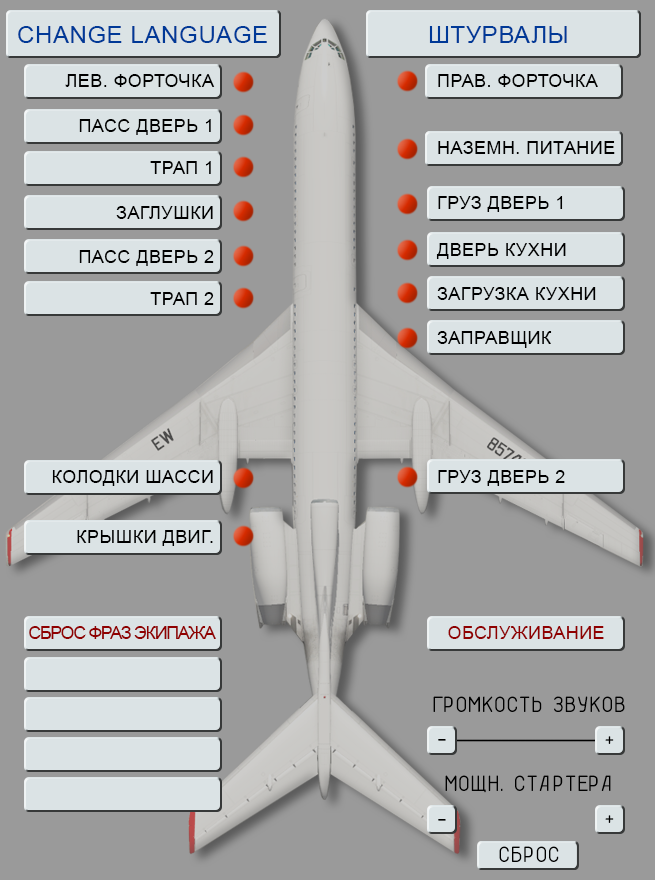
<style>
.page{position:relative;width:655px;height:880px;background:#9a9a9a}
.page>*{position:absolute;margin:0}
.t1{font:24px "ArialMT";letter-spacing:0.025em;color:#003997}
.t2{font:18px "ArialMT";letter-spacing:0.025em;color:#000000}
.t3{font:18px "ArialMT";letter-spacing:-0.075em;color:#8f0000}
.t4{font:18px "ArialMT";letter-spacing:0.025em;color:#8f0000}
.t5{font:24px "LENYA69";color:#000000}
</style>
<div class="page">
<p class="t1" style="left:18px;top:26px;width:249px;height:17px">CHANGE LANGUAGE</p>
<p class="t1" style="left:429px;top:26px;width:138px;height:17px">ШТУРВАЛЫ</p>
<p class="t2" style="left:65px;top:74px;width:150px;height:13px">ЛЕВ. ФОРТОЧКА</p>
<p class="t2" style="left:438px;top:74px;width:160px;height:13px">ПРАВ. ФОРТОЧКА</p>
<p class="t2" style="left:79px;top:119px;width:132px;height:16px">ПАСС ДВЕРЬ 1</p>
<p class="t2" style="left:438px;top:141px;width:177px;height:13px">НАЗЕМН. ПИТАНИЕ</p>
<p class="t2" style="left:150px;top:161px;width:61px;height:13px">ТРАП 1</p>
<p class="t2" style="left:438px;top:196px;width:125px;height:16px">ГРУЗ ДВЕРЬ 1</p>
<p class="t2" style="left:116px;top:206px;width:97px;height:13px">ЗАГЛУШКИ</p>
<p class="t2" style="left:436px;top:243px;width:130px;height:16px">ДВЕРЬ КУХНИ</p>
<p class="t2" style="left:79px;top:250px;width:135px;height:16px">ПАСС ДВЕРЬ 2</p>
<p class="t2" style="left:150px;top:292px;width:64px;height:13px">ТРАП 2</p>
<p class="t2" style="left:437px;top:287px;width:159px;height:13px">ЗАГРУЗКА КУХНИ</p>
<p class="t2" style="left:437px;top:331px;width:115px;height:17px">ЗАПРАВЩИК</p>
<p class="t2" style="left:52px;top:470px;width:161px;height:16px">КОЛОДКИ ШАССИ</p>
<p class="t2" style="left:438px;top:470px;width:127px;height:16px">ГРУЗ ДВЕРЬ 2</p>
<p class="t2" style="left:77px;top:530px;width:136px;height:16px">КРЫШКИ ДВИГ.</p>
<p class="t3" style="left:29px;top:626px;width:187px;height:13px">СБРОС ФРАЗ ЭКИПАЖА</p>
<p class="t4" style="left:448px;top:626px;width:156px;height:13px">ОБСЛУЖИВАНИЕ</p>
<p class="t5" style="left:433px;top:696px;width:192px;height:16px">ГРОМКОСТЬ ЗВУКОВ</p>
<p class="t5" style="left:605px;top:736px;width:9px;height:8px">+</p>
<p class="t5" style="left:438px;top:739px;width:8px;height:2px">-</p>
<p class="t5" style="left:445px;top:775px;width:166px;height:18px">МОЩН. СТАРТЕРА</p>
<p class="t5" style="left:438px;top:819px;width:8px;height:2px">-</p>
<p class="t5" style="left:605px;top:815px;width:9px;height:8px">+</p>
<p class="t5" style="left:499px;top:846px;width:60px;height:16px">СБРОС</p>
</div>
